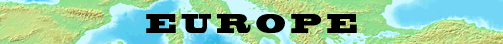
<style>
.page{position:relative;width:503px;height:44px}
.page>*{position:absolute;margin:0}
.t1{font:25.6px "BlackoakStd";letter-spacing:0.3em;color:#000000;scale:0.66 1}
</style>
<div class="page">
<p class="t1" style="left:146px;top:14px;width:211px;height:19px">EUROPE</p>
</div>
